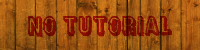
<style>
.page{position:relative;width:200px;height:50px}
.page>*{position:absolute;margin:0}
.t1{font:24px "District";color:#800e03}
</style>
<div class="page">
<p class="t1" style="left:28px;top:15px;width:144px;height:23px">no tutorial</p>
</div>
